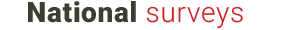
<style>
.page{position:relative;width:291px;height:30px;background:#ffffff}
.page>*{position:absolute;margin:0}
.t1{font:28px "Roboto-Black";letter-spacing:0.025em;color:#3f3d32}
.t2{font:28px "Roboto-Light";letter-spacing:0.025em;color:#c92027}
</style>
<div class="page">
<p class="t1" style="left:28px;top:1px;width:215px;height:28px">National <span class="t2">surveys</span></p>
</div>
